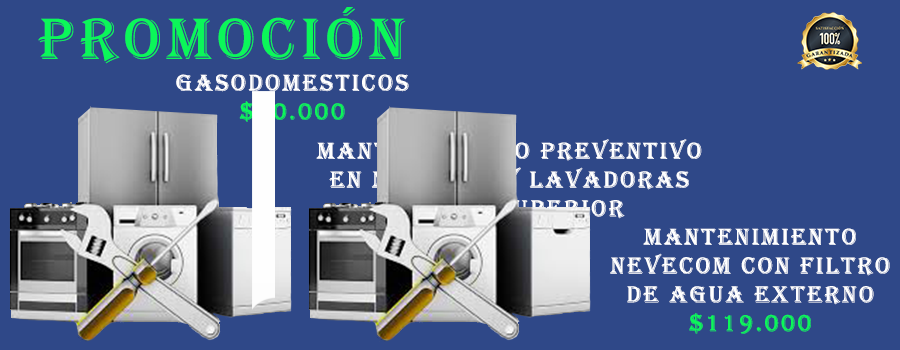
<style>
.page{position:relative;width:900px;height:350px;background:#2f4888}
.page>*{position:absolute;margin:0}
.t1{font:60px "Algerian";letter-spacing:0.1em;color:#0bf759;text-transform:uppercase}
.t2{font:24px "Algerian";letter-spacing:0.1em;color:#ffffff;text-transform:uppercase}
.t3{font:24px "Algerian";letter-spacing:0.1em;color:#0bf759;text-transform:uppercase}
</style>
<div class="page">
<p class="t1" style="left:38px;top:7px;width:368px;height:57px">promoción</p>
<p class="t2" style="left:176px;top:74px;width:233px;height:48px;text-align:center">GASODOMESTICOS<br><span class="t3">$70.000</span></p>
<p class="t2" style="left:316px;top:139px;width:386px;height:109px;text-align:center">mANTENIMIENTO PREVENTIVO EN NEVERAS Y LAVADORAS CARGA SUPERIOR<br><span class="t3">$70.000</span></p>
<p class="t2" style="left:610px;top:228px;width:280px;height:106px;text-align:center">mANTENIMIENTO NEVECOM CON FILTRO DE AGUA EXTERNO<br><span class="t3">$119.000</span></p>
</div>
